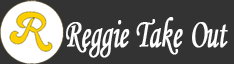
<style>
.page{position:relative;width:234px;height:64px;background:#333333}
.page>*{position:absolute;margin:0}
.t1{font:41.7px "STLiti";letter-spacing:-0.02em;color:#fffefe;font-weight:bold;scale:0.65 1}
</style>
<div class="page">
<p class="t1" style="left:66px;top:17px;width:162px;height:41px">Reggie Take Out</p>
</div>
